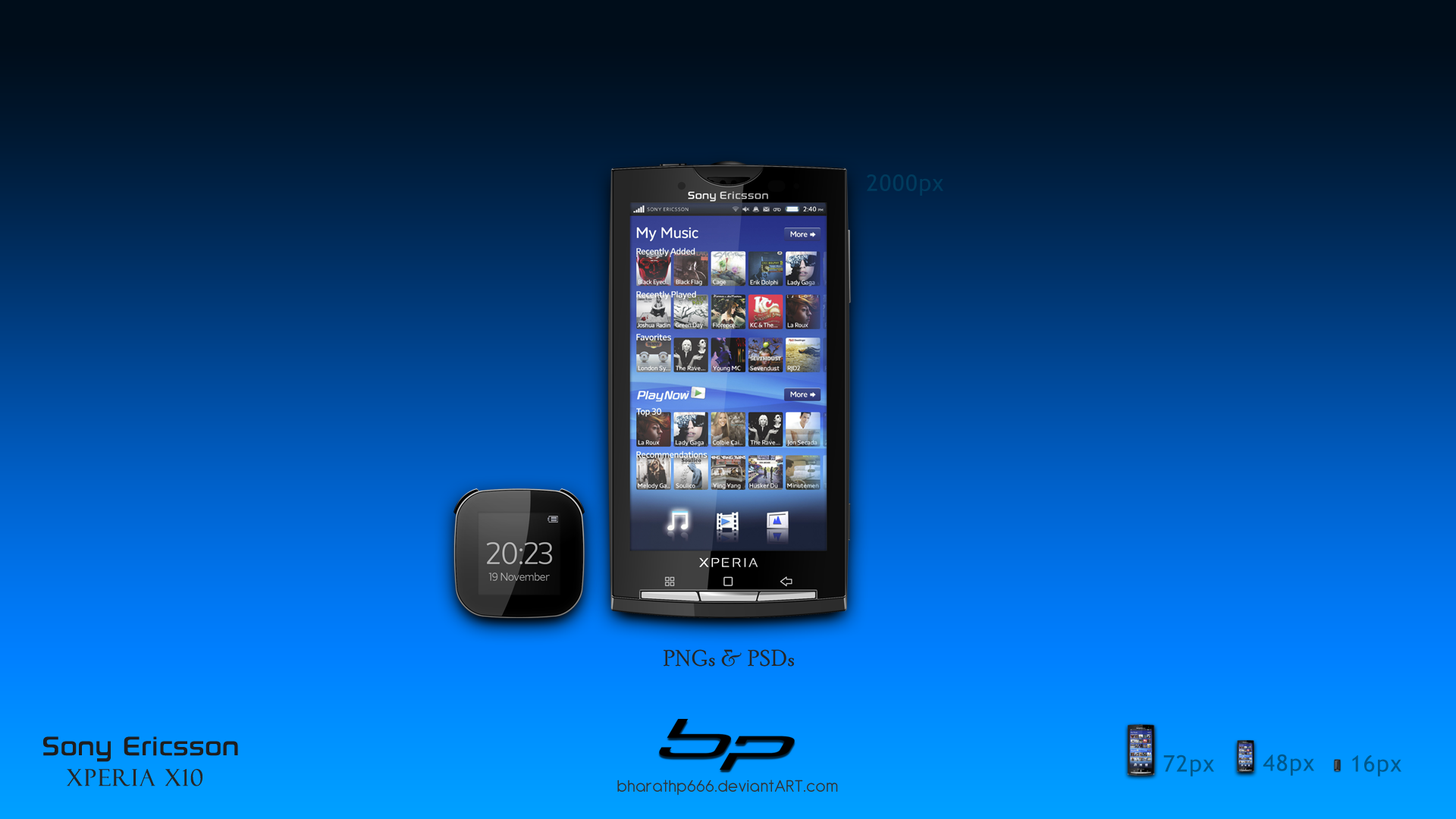
<style>
.page{position:relative;width:1456px;height:819px}
.page>*{position:absolute;margin:0}
.t1{font:22.7px "TrebuchetMS";letter-spacing:0.05em;color:#004466}
.t2{font:22.7px "PoorRichard-Regular";letter-spacing:0.05em;color:#262626}
.t3{font:37.9px "SonySketchEF";color:#1f1e1e;scale:0.9 1}
.t4{font:22.7px "TrebuchetMS";letter-spacing:0.05em;color:#00598c}
.t5{font:22.7px "FelixTitlingMT";letter-spacing:0.05em;color:#262626;font-weight:bold}
.t6{font:18.2px "Antipasto";letter-spacing:0.05em;color:#333333}
</style>
<div class="page">
<p class="t1" style="left:867px;top:174px;width:76px;height:22px;opacity:0.75">2000px</p>
<p class="t2" style="left:664px;top:649px;width:130px;height:18px">PNGs &amp; PSDs</p>
<p class="t3" style="left:43px;top:736px;width:195px;height:26px">Sony Ericsson</p>
<p class="t4" style="left:1163px;top:755px;width:51px;height:22px">72px</p>
<p class="t4" style="left:1263px;top:754px;width:51px;height:22px">48px</p>
<p class="t4" style="left:1352px;top:755px;width:49px;height:22px">16px</p>
<p class="t5" style="left:67px;top:769px;width:135px;height:17px">Xperia X10</p>
<p class="t6" style="left:617px;top:780px;width:221px;height:15px">bharathp666.deviantART.com</p>
</div>
